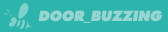
<style>
.page{position:relative;width:168px;height:32px;background:#2bb5ac}
.page>*{position:absolute;margin:0}
.t1{font:13.5px "FuturaLT-ExtraBoldOblique";color:#97d5d0}
</style>
<div class="page">
<p class="t1" style="left:38px;top:10px;width:124px;height:13px">DOOR_BUZZING</p>
</div>
